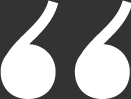
<style>
.page{position:relative;width:131px;height:99px;background:#333333}
.page>*{position:absolute;margin:0}
.t1{font:400px "QumpellkaNo12";color:#ffffff}
</style>
<div class="page">
<p class="t1" style="left:0px;top:0px;width:133px;height:99px">“</p>
</div>
